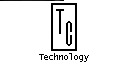
<style>
.page{position:relative;width:128px;height:64px;background:#ffffff}
.page>*{position:absolute;margin:0}
.t1{font:9px "LucidaConsole";color:#000000}
</style>
<div class="page">
<p class="t1" style="left:39px;top:53px;width:50px;height:9px">Technology</p>
</div>
